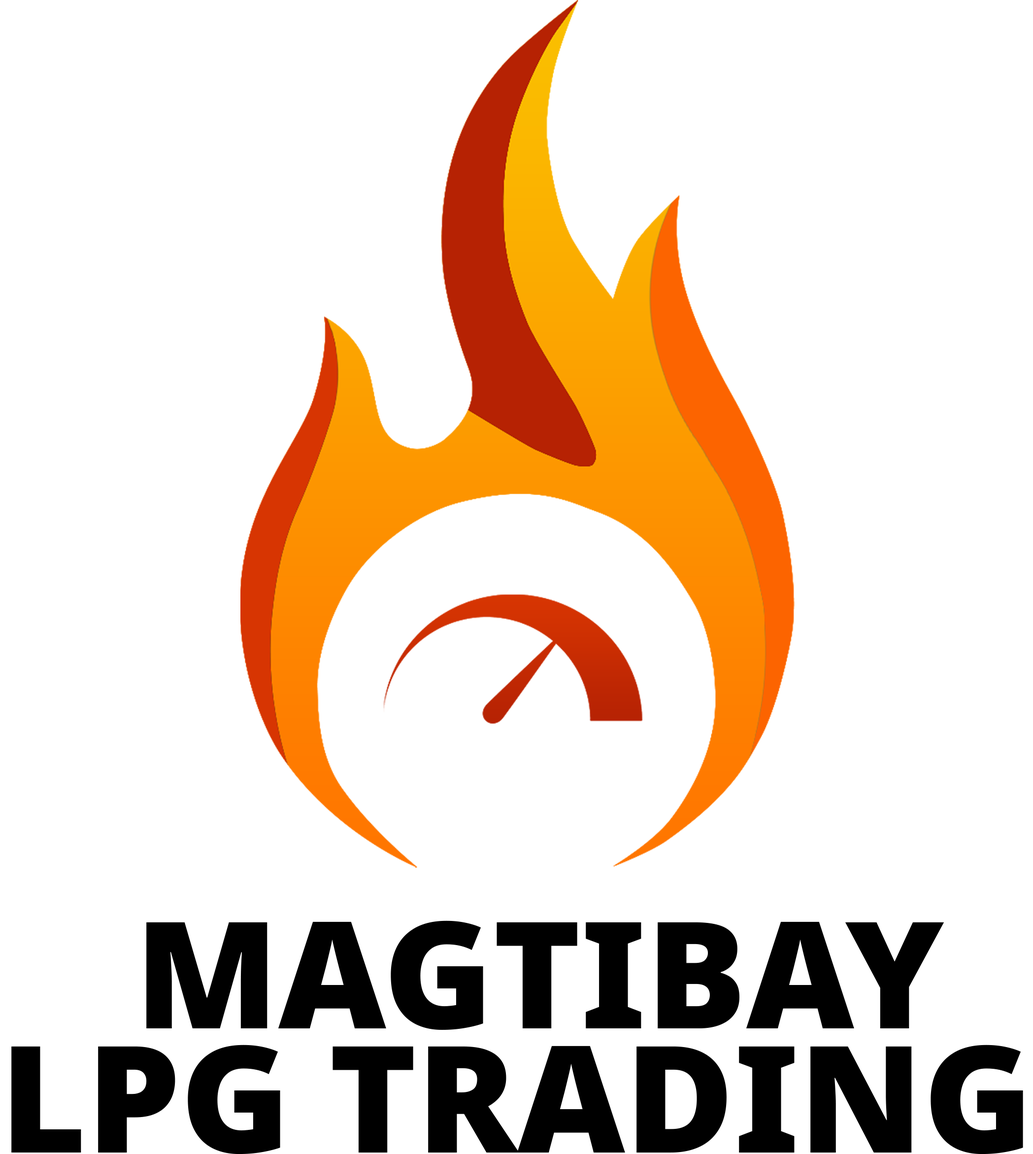
<style>
.page{position:relative;width:1033px;height:1154px;background:#ffffff}
.page>*{position:absolute;margin:0}
.t1{font:148.5px "NotoSans-Black";color:#000000}
</style>
<div class="page">
<p class="t1" style="left:146px;top:920px;width:799px;height:110px">MAGTIBAY</p>
<p class="t1" style="left:11px;top:1045px;width:1012px;height:110px">LPG TRADING</p>
</div>
